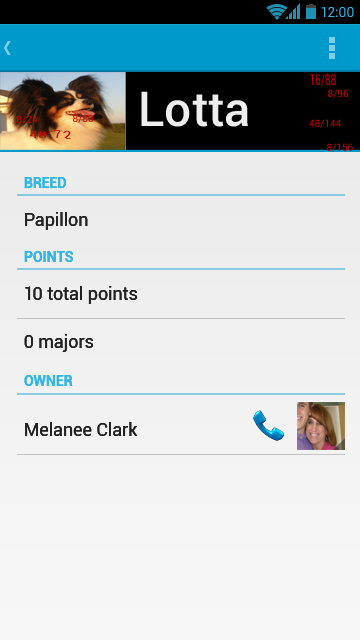
<style>
.page{position:relative;width:360px;height:640px}
.page>*{position:absolute;margin:0}
.t1{font:14px "Roboto-Regular";color:#33b5e5}
.t2{font:14.6px "Roboto-Regular";color:#cc0000;scale:0.68 1}
.t3{font:10px "Roboto-Regular"}
.t4{font:48px "Roboto-Medium";color:#eeeeee}
.t5{font:10px "Roboto-Regular";color:#cc0000}
.t6{font:10px "Roboto-Regular";color:#cc0000;scale:1.58 1}
.t7{font:10px/18px "Roboto-Regular";color:#cc0000}
.t8{font:14px "Roboto-Bold";color:#33b5e5}
.t9{font:18px "Roboto-Regular";color:#222222}
</style>
<div class="page">
<p class="t1" style="left:321px;top:7px;width:33px;height:10px">12:00</p>
<p class="t1" style="left:321px;top:7px;width:33px;height:10px">12:00</p>
<p class="t2" style="left:310px;top:74px;width:26px;height:12px">16/88</p>
<p class="t3" style="left:328px;top:89px;width:21px;height:9px">8/96</p>
<p class="t4" style="left:141px;top:91px;width:107px;height:36px">Lotta</p>
<p class="t5" style="left:17px;top:115px;width:21px;height:9px">8/24</p>
<p class="t5" style="left:73px;top:114px;width:20px;height:9px">8/80</p>
<p class="t5" style="left:309px;top:119px;width:32px;height:9px">48/144</p>
<p class="t6" style="left:29px;top:130px;width:42px;height:9px">48/72</p>
<p class="t7" style="left:327px;top:143px;width:26px;height:9px">8/156<br>vmm</p>
<p class="t8" style="left:24px;top:177px;width:42px;height:11px">BREED</p>
<p class="t8" style="left:24px;top:177px;width:42px;height:11px">BREED</p>
<p class="t9" style="left:25px;top:212px;width:63px;height:18px">Papillon</p>
<p class="t9" style="left:25px;top:212px;width:63px;height:18px">Papillon</p>
<p class="t8" style="left:24px;top:251px;width:49px;height:11px">POINTS</p>
<p class="t8" style="left:24px;top:251px;width:49px;height:11px">POINTS</p>
<p class="t9" style="left:25px;top:286px;width:113px;height:18px">10 total points</p>
<p class="t9" style="left:25px;top:286px;width:113px;height:18px">10 total points</p>
<p class="t9" style="left:24px;top:334px;width:70px;height:18px">0 majors</p>
<p class="t9" style="left:24px;top:334px;width:70px;height:18px">0 majors</p>
<p class="t8" style="left:24px;top:375px;width:49px;height:11px">OWNER</p>
<p class="t8" style="left:24px;top:375px;width:49px;height:11px">OWNER</p>
<p class="t9" style="left:25px;top:422px;width:113px;height:14px">Melanee Clark</p>
<p class="t9" style="left:25px;top:422px;width:113px;height:14px">Melanee Clark</p>
</div>
